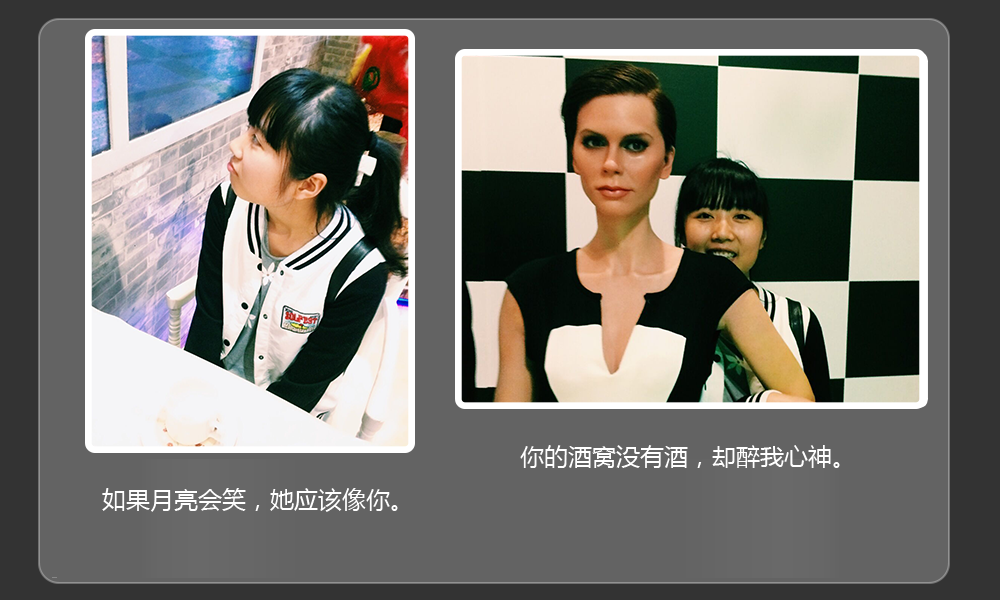
<style>
.page{position:relative;width:1000px;height:600px;background:#636363}
.page>*{position:absolute;margin:0}
.t1{font:24px "MicrosoftYaHei";color:#ffffff}
</style>
<div class="page">
<p class="t1" style="left:520px;top:445px;width:320px;height:23px">你的酒窝没有酒，却醉我心神。</p>
<p class="t1" style="left:102px;top:488px;width:296px;height:24px">如果月亮会笑，她应该像你。</p>
</div>
